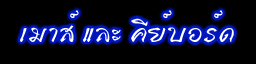
<style>
.page{position:relative;width:256px;height:64px;background:#000000}
.page>*{position:absolute;margin:0}
.t1{font:36px "DsSupasawatD";color:#ffffff}
</style>
<div class="page">
<p class="t1" style="left:20px;top:10px;width:214px;height:33px">àÁÒÊì áÅÐ ¤ÕÂìºÍÃì´</p>
</div>
